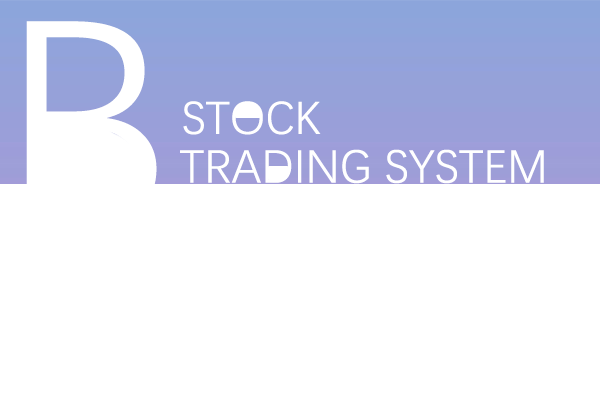
<style>
.page{position:relative;width:600px;height:400px;background:#ffffff}
.page>*{position:absolute;margin:0}
.t1{font:297.5px "DengXian";color:#ffffff}
.t2{font:46.7px "DengXian";color:#ffffff}
.t3{font:47.2px "DengXian";color:#ffffff}
</style>
<div class="page">
<p class="t1" style="left:26px;top:21px;width:131px;height:206px">B</p>
<p class="t2" style="left:183px;top:101px;width:138px;height:34px">STOCK</p>
<p class="t3" style="left:180px;top:149px;width:364px;height:35px">TRADING SYSTEM</p>
</div>
